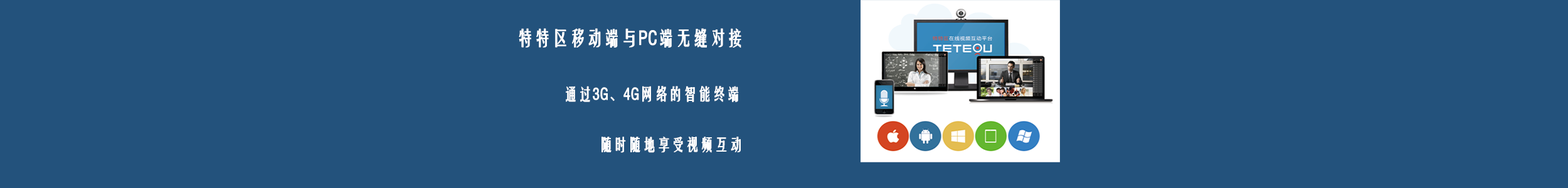
<style>
.page{position:relative;width:1568px;height:188px;background:#23527c}
.page>*{position:absolute;margin:0}
.t1{font:18.8px "FZYTK--GBK1-0";color:#ffffff;font-weight:bold;scale:0.9 1}
.t2{font:15.7px "FZYTK--GBK1-0";color:#ffffff;font-weight:bold;scale:0.9 1}
</style>
<div class="page">
<p class="t1" style="left:519px;top:28px;width:222px;height:20px">特特区移动端与PC端无缝对接</p>
<p class="t2" style="left:566px;top:86px;width:173px;height:16px">通过3G、4G网络的智能终端</p>
<p class="t2" style="left:601px;top:136px;width:140px;height:17px">随时随地享受视频互动</p>
</div>
